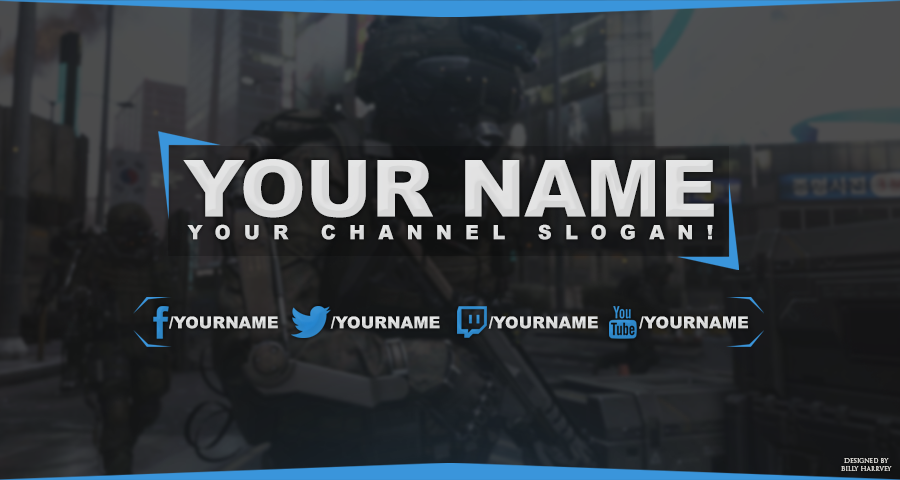
<style>
.page{position:relative;width:900px;height:480px}
.page>*{position:absolute;margin:0}
.t1{font:79px "Arial-Black";color:#dedede}
.t2{font:19.6px "Arial-Black";letter-spacing:0.66em;color:#d8d9d9}
.t3{font:16.4px "Arial-Black";color:#d8d9d9}
.t4{font:6.5px "TrajanPro-Regular";color:#d1cfcb}
</style>
<div class="page">
<p class="t1" style="left:183px;top:159px;width:531px;height:59px">YOUR NAME</p>
<p class="t2" style="left:187px;top:224px;width:526px;height:16px">YOUR CHANNEL SLOGAN!</p>
<p class="t3" style="left:169px;top:316px;width:109px;height:13px">/YOURNAME</p>
<p class="t3" style="left:330px;top:316px;width:110px;height:13px">/YOURNAME</p>
<p class="t3" style="left:488px;top:316px;width:110px;height:13px">/YOURNAME</p>
<p class="t3" style="left:639px;top:316px;width:109px;height:13px">/YOURNAME</p>
<p class="t4" style="left:841px;top:458px;width:51px;height:13px;text-align:center">Designed by<br>Billy Harrvey</p>
</div>
